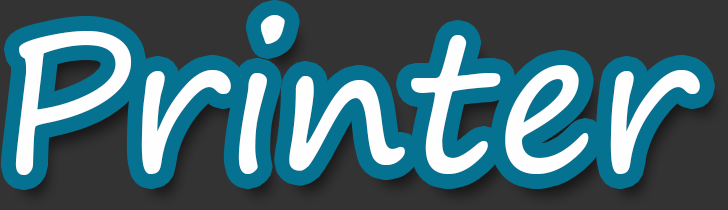
<style>
.page{position:relative;width:728px;height:210px;background:#333333}
.page>*{position:absolute;margin:0}
.t1{font:190.5px "SegoePrint";color:#fefefe}
</style>
<div class="page">
<p class="t1" style="left:15px;top:15px;width:685px;height:160px">Printer</p>
</div>
